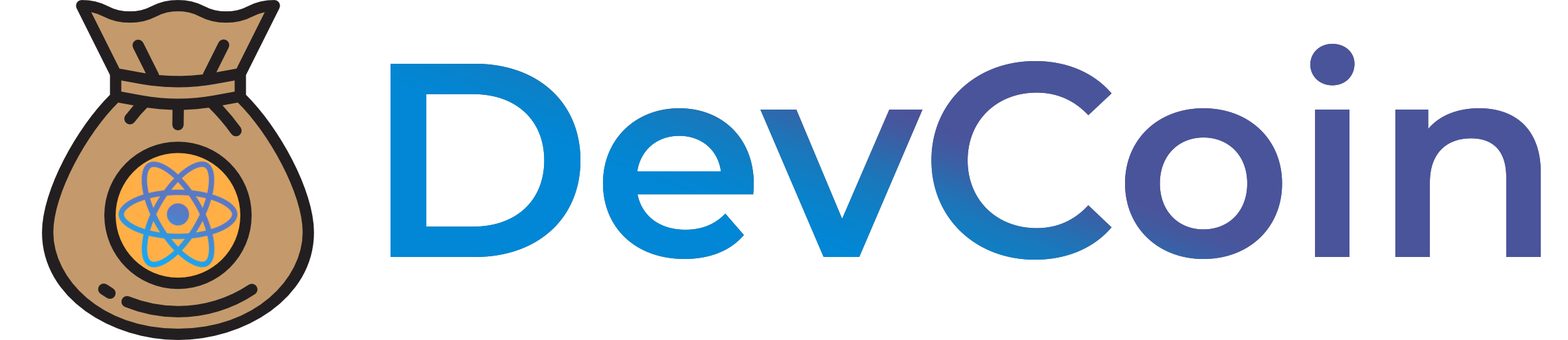
<style>
.page{position:relative;width:1568px;height:340px;background:#ffffff}
.page>*{position:absolute;margin:0}
.t1{font:276.2px "Montserrat-SemiBold"}
</style>
<div class="page">
<p class="t1" style="left:391px;top:44px;width:1150px;height:216px">DevCoin</p>
</div>
